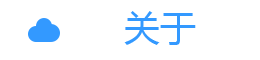
<style>
.page{position:relative;width:260px;height:60px;background:#ffffff}
.page>*{position:absolute;margin:0}
.t1{font:36px "MicrosoftYaHei";color:#3399ff}
</style>
<div class="page">
<p class="t1" style="left:124px;top:11px;width:72px;height:34px">关于</p>
</div>
